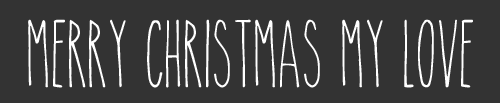
<style>
.page{position:relative;width:500px;height:103px;background:#333333}
.page>*{position:absolute;margin:0}
.t1{font:67.6px "TheSkinny";color:#ffffff}
</style>
<div class="page">
<p class="t1" style="left:28px;top:19px;width:445px;height:69px">Merry christmas my love</p>
</div>
